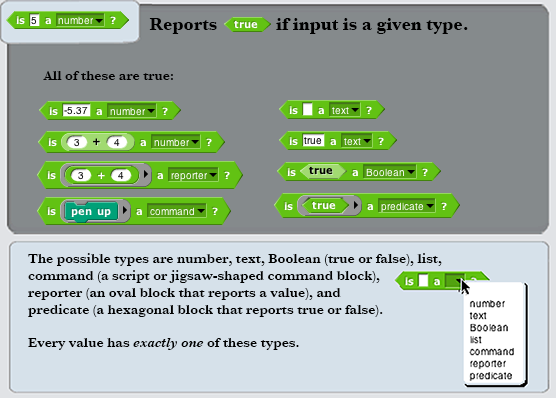
<style>
.page{position:relative;width:556px;height:398px;background:#858a8c}
.page>*{position:absolute;margin:0}
.t1{font:18px "Baskerville-Bold";color:#000000}
.t2{font:14px "Baskerville-SemiBold";color:#000000}
.t3{font:14px "Baskerville-SemiBoldItalic";color:#000000}
</style>
<div class="page">
<p class="t1" style="left:149px;top:18px;width:319px;height:16px">Reports             if input is a given type.</p>
<p class="t2" style="left:43px;top:71px;width:130px;height:9px">All of these are true:</p>
<p class="t2" style="left:28px;top:253px;width:414px;height:97px">The possible types are number, text, Boolean (true or false), list,<br>command (a script or jigsaw-shaped command block),<br>reporter (an oval block that reports a value), and<br>predicate (a hexagonal block that reports true or false).<br><br>Every value has <span class="t3">exactly one </span>of these types.</p>
</div>
